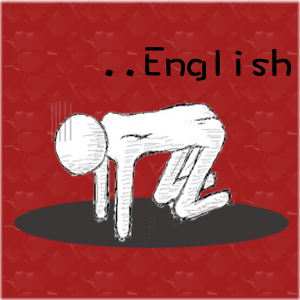
<style>
.page{position:relative;width:300px;height:300px;background:#a31f1f}
.page>*{position:absolute;margin:0}
.t1{font:40px "DFWaWa-Md-HK-BF";color:#000000;font-weight:bold}
</style>
<div class="page">
<p class="t1" style="left:105px;top:47px;width:186px;height:34px">..English</p>
</div>
